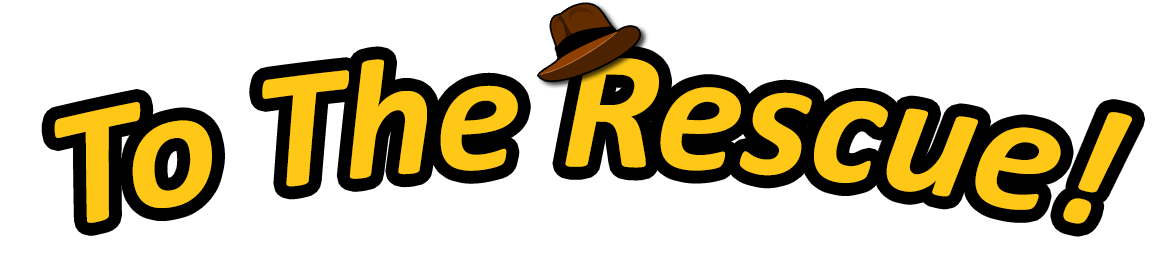
<style>
.page{position:relative;width:1175px;height:259px;background:#ffffff}
.page>*{position:absolute;margin:0}
.t1{font:170px "Calibri-BoldItalic";color:#ffc816}
</style>
<div class="page">
<p class="t1" style="left:54px;top:57px;width:1078px;height:167px">To The Rescue!</p>
</div>
